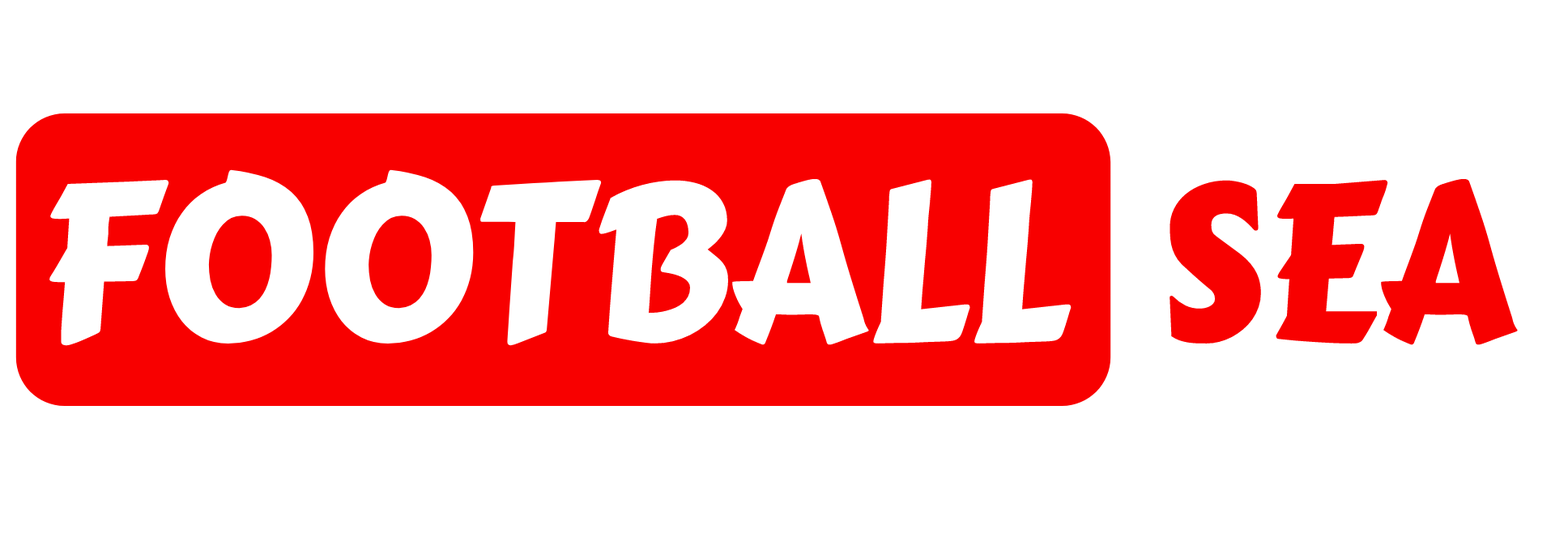
<style>
.page{position:relative;width:1568px;height:538px;background:#ffffff}
.page>*{position:absolute;margin:0}
.t1{font:219.6px "CarterOne";color:#ffffff;scale:0.92 1}
.t2{font:219.6px "CarterOne";color:#f80000;scale:0.92 1}
</style>
<div class="page">
<p class="t1" style="left:49px;top:169px;width:1469px;height:177px">FOOTBALL  <span class="t2">SEA</span></p>
</div>
